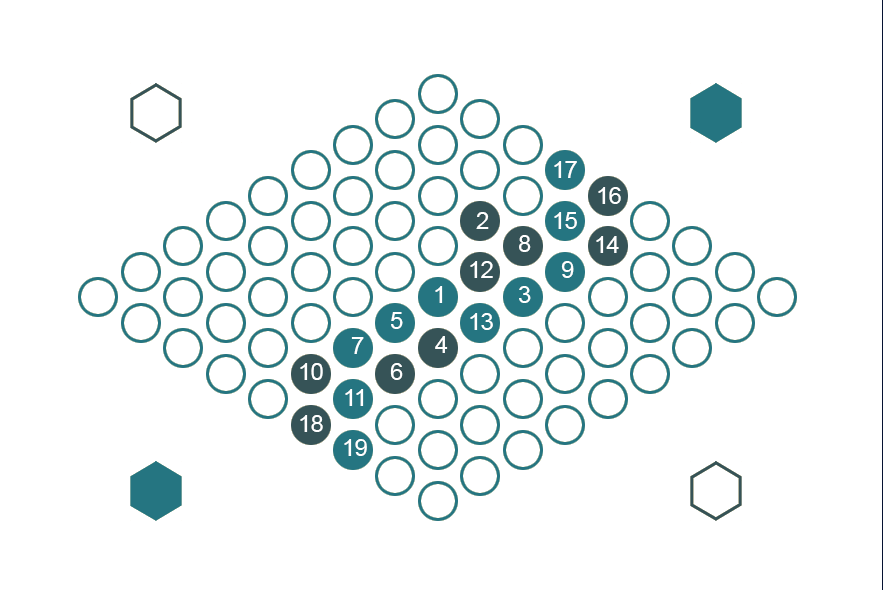
<style>
.page{position:relative;width:883px;height:590px;background:#ffffff}
.page>*{position:absolute;margin:0}
.t1{font:24px "ArialMT";letter-spacing:-0.025em;color:#ffffff}
</style>
<div class="page">
<p class="t1" style="left:554px;top:161px;width:23px;height:17px">17</p>
<p class="t1" style="left:598px;top:187px;width:23px;height:17px">16</p>
<p class="t1" style="left:476px;top:212px;width:13px;height:17px">2</p>
<p class="t1" style="left:554px;top:212px;width:23px;height:17px">15</p>
<p class="t1" style="left:519px;top:235px;width:12px;height:17px">8</p>
<p class="t1" style="left:596px;top:236px;width:23px;height:17px">14</p>
<p class="t1" style="left:470px;top:261px;width:23px;height:17px">12</p>
<p class="t1" style="left:561px;top:261px;width:13px;height:17px">9</p>
<p class="t1" style="left:435px;top:286px;width:8px;height:17px">1</p>
<p class="t1" style="left:519px;top:286px;width:12px;height:17px">3</p>
<p class="t1" style="left:391px;top:312px;width:12px;height:17px">5</p>
<p class="t1" style="left:470px;top:313px;width:23px;height:17px">13</p>
<p class="t1" style="left:351px;top:337px;width:13px;height:17px">7</p>
<p class="t1" style="left:435px;top:336px;width:13px;height:17px">4</p>
<p class="t1" style="left:300px;top:363px;width:23px;height:17px">10</p>
<p class="t1" style="left:390px;top:363px;width:13px;height:17px">6</p>
<p class="t1" style="left:345px;top:389px;width:19px;height:17px">11</p>
<p class="t1" style="left:300px;top:415px;width:23px;height:17px">18</p>
<p class="t1" style="left:344px;top:439px;width:23px;height:17px">19</p>
</div>
